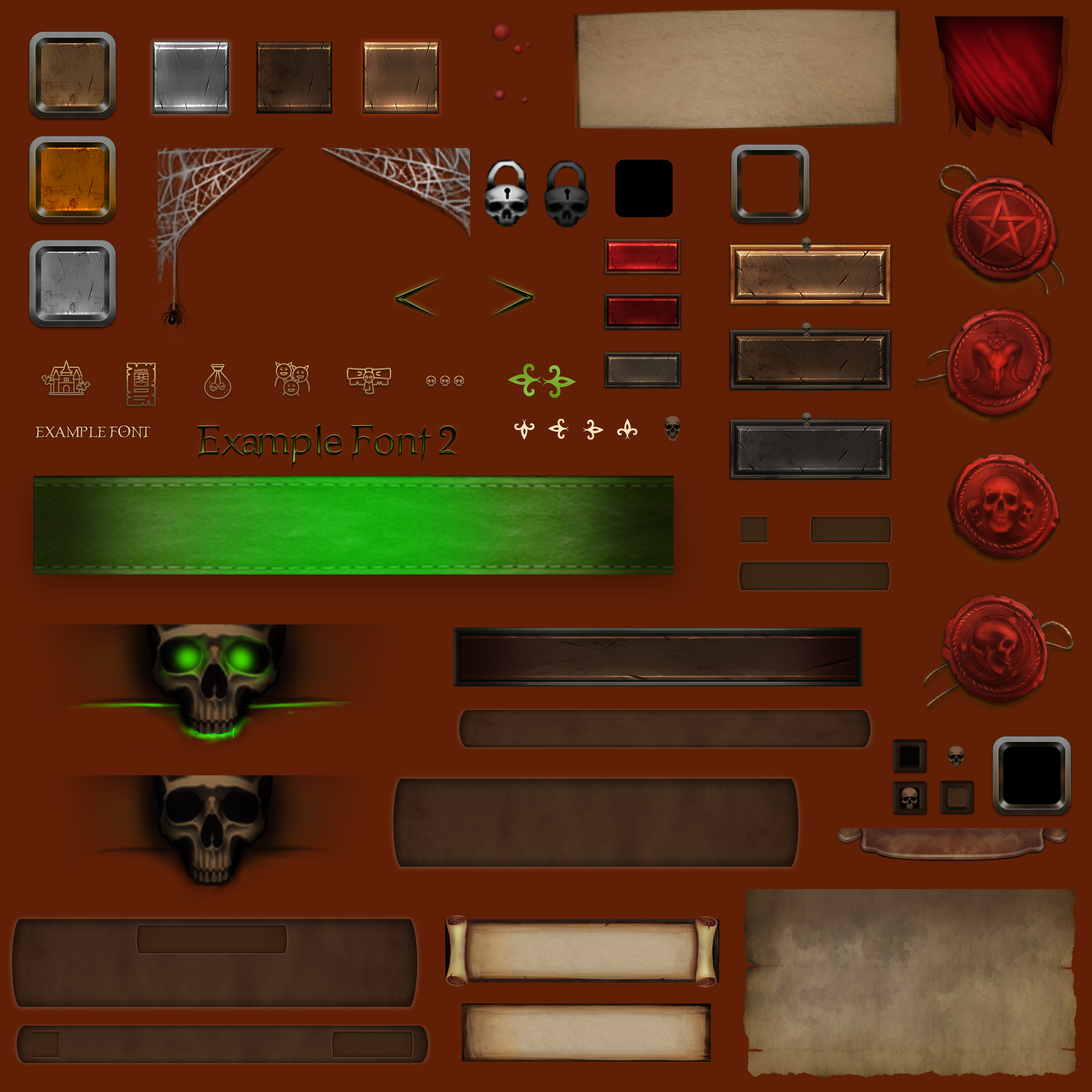
<style>
.page{position:relative;width:1092px;height:1092px;background:#612006}
.page>*{position:absolute;margin:0}
.t1{font:16.3px "Nosferatu";color:#e6c888;text-transform:uppercase}
.t2{font:44.4px "Nosferatu";letter-spacing:-0.005em}
</style>
<div class="page">
<p class="t1" style="left:35px;top:425px;width:115px;height:15px">Example Font</p>
<p class="t2" style="left:197px;top:424px;width:266px;height:45px">Example Font 2</p>
</div>
